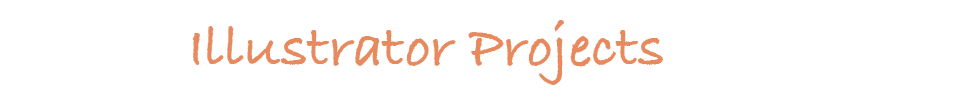
<style>
.page{position:relative;width:960px;height:100px;background:#ffffff}
.page>*{position:absolute;margin:0}
.t1{font:60px "BradleyHandITCTT-Bold";color:#e88b5f}
</style>
<div class="page">
<p class="t1" style="left:192px;top:20px;width:471px;height:65px">Illustrator Projects</p>
</div>
